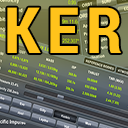
<style>
.page{position:relative;width:128px;height:128px}
.page>*{position:absolute;margin:0}
.t1{font:63.8px "RobotoCondensed-Bold";letter-spacing:0.1em;color:#ffc31a;scale:1.07 1}
</style>
<div class="page">
<p class="t1" style="left:7px;top:7px;width:114px;height:46px">KER</p>
</div>
